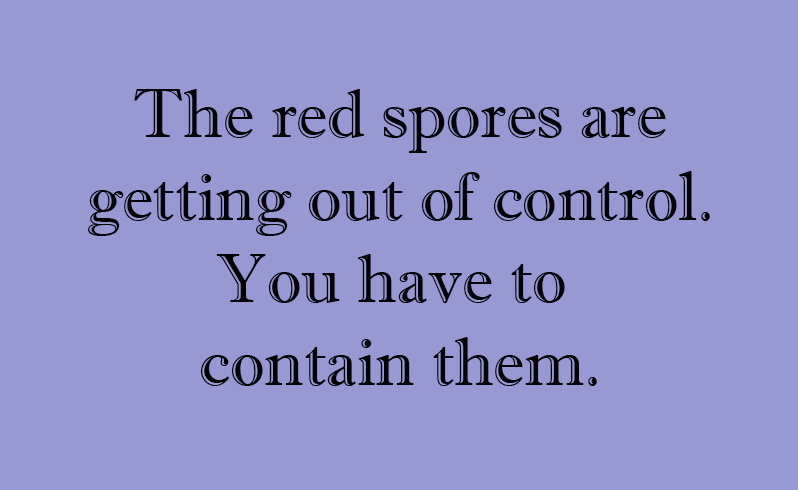
<style>
.page{position:relative;width:798px;height:490px;background:#9898d3}
.page>*{position:absolute;margin:0}
.t1{font:68.7px "ImprintMT-Shadow";color:#030303}
</style>
<div class="page">
<p class="t1" style="left:88px;top:89px;width:622px;height:297px;text-align:center">The red spores are<br>getting out of control.<br>You have to <br>contain them.</p>
</div>
